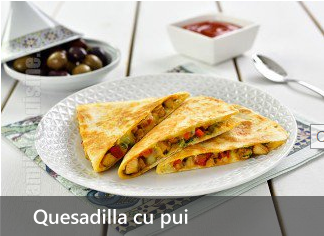
<style>
.page{position:relative;width:324px;height:236px}
.page>*{position:absolute;margin:0}
.t1{font:20px "SegoeUI-Semibold";color:#ffffff}
</style>
<div class="page">
<p class="t1" style="left:33px;top:209px;width:155px;height:20px">Quesadilla cu pui</p>
</div>
